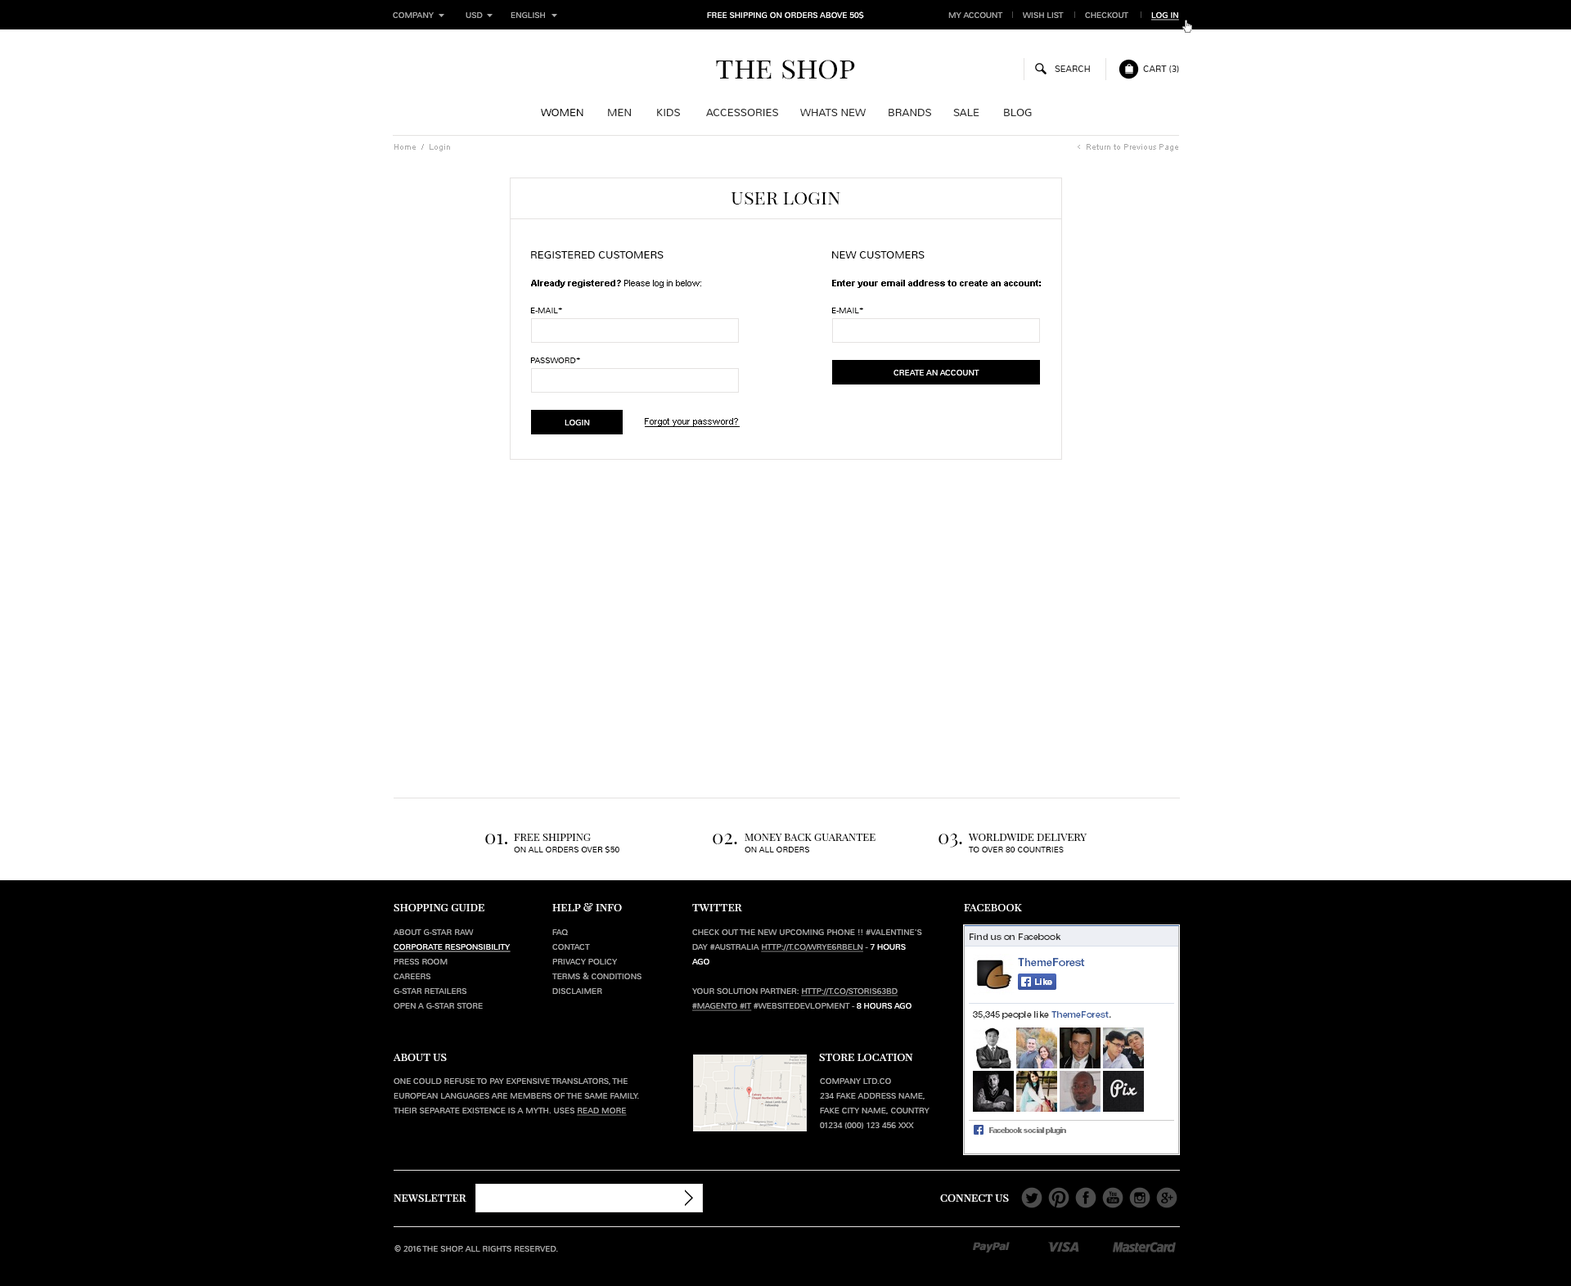
<style>
.page{position:relative;width:1571px;height:1286px;background:#ffffff}
.page>*{position:absolute;margin:0}
.t1{font:8.2px "Nunito-Light";color:#aaaaaa;text-transform:uppercase}
.t2{font:8.2px "Nunito-Light";color:#ffffff;text-transform:uppercase}
.t3{font:8.2px "Nunito-Light";color:#ffffff;text-transform:uppercase;text-decoration:underline}
.t4{font:29.5px "PlayfairDisplaySC-Regular";color:#000000}
.t5{font:9px "Nunito-Light";color:#282828;text-transform:uppercase}
.t6{font:10.6px "Nunito-Light";color:#000000;text-transform:uppercase}
.t7{font:10.6px "Nunito-Light";color:#282828;text-transform:uppercase}
.t8{font:8.2px "ArialMT";color:#aaaaaa}
.t9{font:9.8px "Cabin-Regular";color:#aaaaaa}
.t10{font:19.6px "PlayfairDisplaySC-Regular";color:#000000}
.t11{font:9px "ArialMT";color:#000000}
.t12{font:9px "Arial-BoldMT";color:#000000}
.t13{font:8.2px "Nunito-Light";color:#000000;text-transform:uppercase}
.t14{font:9px "ArialMT";color:#000000;text-decoration:underline}
.t15{font:10.6px "PlayfairDisplaySC-Regular";color:#000000;text-transform:uppercase}
.t16{font:11.5px "PlayfairDisplaySC-Regular";color:#ffffff}
.t17{font:8.2px/14.7px "Nunito-Light";color:#aaaaaa;text-transform:uppercase}
.t18{font:8.2px/14.7px "Nunito-Light";color:#ffffff;text-transform:uppercase;text-decoration:underline}
.t19{font:8.2px/14.7px "Nunito-Light";color:#aaaaaa;text-transform:uppercase;text-decoration:underline}
.t20{font:8.2px/14.7px "Nunito-Light";color:#ffffff;text-transform:uppercase}
</style>
<div class="page">
<p class="t1" style="left:393px;top:12px;width:41px;height:6px">company</p>
<p class="t1" style="left:466px;top:12px;width:17px;height:6px">usD</p>
<p class="t1" style="left:511px;top:12px;width:34px;height:6px">English</p>
<p class="t2" style="left:707px;top:11px;width:157px;height:8px">free shipping on orders above 50$</p>
<p class="t1" style="left:948px;top:12px;width:55px;height:6px">my account</p>
<p class="t1" style="left:1023px;top:12px;width:41px;height:6px">wish list</p>
<p class="t1" style="left:1085px;top:12px;width:43px;height:6px">Checkout</p>
<p class="t3" style="left:1151px;top:12px;width:28px;height:8px">log in</p>
<p class="t4" style="left:716px;top:60px;width:139px;height:19px">the shop</p>
<p class="t5" style="left:1055px;top:65px;width:35px;height:7px">search</p>
<p class="t5" style="left:1143px;top:65px;width:36px;height:8px">Cart (3)</p>
<p class="t6" style="left:541px;top:109px;width:42px;height:7px">women</p>
<p class="t7" style="left:608px;top:109px;width:23px;height:7px">men</p>
<p class="t7" style="left:657px;top:109px;width:23px;height:7px">kids</p>
<p class="t7" style="left:706px;top:109px;width:72px;height:7px">accessories</p>
<p class="t7" style="left:800px;top:109px;width:66px;height:7px">whats new</p>
<p class="t7" style="left:889px;top:109px;width:42px;height:7px">brands</p>
<p class="t7" style="left:953px;top:109px;width:26px;height:7px">sale</p>
<p class="t7" style="left:1004px;top:109px;width:28px;height:7px">blog</p>
<p class="t8" style="left:394px;top:144px;width:56px;height:7px">Home  /  Login</p>
<p class="t9" style="left:1078px;top:145px;width:2px;height:4px">&lt;</p>
<p class="t8" style="left:1087px;top:144px;width:91px;height:7px">Return to Previous Page</p>
<p class="t10" style="left:731px;top:192px;width:109px;height:13px">user login</p>
<p class="t6" style="left:531px;top:251px;width:133px;height:8px">registered customers</p>
<p class="t6" style="left:832px;top:251px;width:93px;height:8px">new customers</p>
<p class="t11" style="left:531px;top:280px;width:170px;height:8px"><span class="t12">Already registered?</span> Please log in below:</p>
<p class="t12" style="left:832px;top:280px;width:209px;height:8px">Enter your email address to create an account:</p>
<p class="t13" style="left:530px;top:308px;width:32px;height:5px">e-mail*</p>
<p class="t13" style="left:831px;top:308px;width:32px;height:5px">e-mail*</p>
<p class="t13" style="left:530px;top:358px;width:50px;height:5px">password*</p>
<p class="t2" style="left:893px;top:370px;width:86px;height:6px">create an account</p>
<p class="t2" style="left:565px;top:420px;width:25px;height:5px">login</p>
<p class="t14" style="left:645px;top:418px;width:95px;height:9px">Forgot your password?</p>
<p class="t10" style="left:485px;top:834px;width:22px;height:10px">01.</p>
<p class="t15" style="left:514px;top:834px;width:77px;height:7px">Free Shipping</p>
<p class="t10" style="left:713px;top:834px;width:24px;height:10px">02.</p>
<p class="t15" style="left:745px;top:834px;width:130px;height:7px">Money back guarantee</p>
<p class="t10" style="left:938px;top:834px;width:24px;height:14px">03.</p>
<p class="t15" style="left:968px;top:834px;width:119px;height:7px">Worldwide Delivery</p>
<p class="t13" style="left:514px;top:846px;width:105px;height:7px">On all orders over $50</p>
<p class="t13" style="left:745px;top:847px;width:65px;height:6px">On all orders</p>
<p class="t13" style="left:969px;top:847px;width:95px;height:6px">To over 80 countries</p>
<p class="t16" style="left:394px;top:904px;width:90px;height:7px">shopping guide</p>
<p class="t16" style="left:552px;top:903px;width:70px;height:8px">help &amp; info</p>
<p class="t16" style="left:692px;top:904px;width:50px;height:7px">twitter</p>
<p class="t16" style="left:964px;top:904px;width:58px;height:7px">facebook</p>
<p class="t17" style="left:394px;top:929px;width:117px;height:80px">About G-Star Raw<br><span class="t18">Corporate Responsibility<br></span>Press Room<br>Careers<br>G-Star Retailers<br>Open a G-Star Store</p>
<p class="t17" style="left:552px;top:929px;width:89px;height:65px">FAQ<br>Contact<br>Privacy Policy<br>Terms &amp; Conditions<br>Disclaimer</p>
<p class="t17" style="left:692px;top:929px;width:230px;height:82px">check out the new upcoming phone !! #Valentine's Day #Australia <span class="t19">http://t.co/wRye6rBElN</span> - <span class="t20">7 hours ago<br></span><br>your solution partner: <span class="t19">http://t.co/StOrIs63bd #magento #IT</span> #websitedevlopment - <span class="t20">8 hours ago</span></p>
<p class="t16" style="left:393px;top:1054px;width:54px;height:7px">about us</p>
<p class="t16" style="left:819px;top:1054px;width:94px;height:7px">store location</p>
<p class="t17" style="left:394px;top:1078px;width:245px;height:38px">One could refuse to pay expensive translators, the European languages are members of the same family. Their separate existence is a myth. Uses <span class="t19">read more</span></p>
<p class="t17" style="left:820px;top:1078px;width:109px;height:51px">Company ltd.co<br>234 Fake address name,<br>Fake city name, Country<br>01234 (000) 123 456 xxx</p>
<p class="t16" style="left:394px;top:1195px;width:72px;height:7px">newsletter</p>
<p class="t16" style="left:940px;top:1195px;width:69px;height:7px">connect us</p>
<p class="t1" style="left:394px;top:1245px;width:164px;height:7px">© 2016 the shop. All Rights Reserved.</p>
</div>
